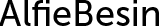
<style>
.page{position:relative;width:159px;height:26px;background:#ffffff}
.page>*{position:absolute;margin:0}
.t1{font:36px "MuseoSans-500";color:#000000}
</style>
<div class="page">
<p class="t1" style="left:0px;top:0px;width:159px;height:26px">AlfieBesin</p>
</div>
